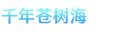
<style>
.page{position:relative;width:128px;height:32px;background:#ffffff}
.page>*{position:absolute;margin:0}
.t1{font:17.3px "HYWenHei-FEW";letter-spacing:0.025em;scale:0.97 1}
</style>
<div class="page">
<p class="t1" style="left:1px;top:7px;width:86px;height:17px">千年苍树海</p>
</div>
